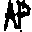
<style>
.page{position:relative;width:32px;height:32px;background:#ffffff}
.page>*{position:absolute;margin:0}
.t1{font:30.8px "ChasedThroughTheWoods";letter-spacing:0.1em;color:#000000;font-weight:bold;scale:0.55 1}
</style>
<div class="page">
<p class="t1" style="left:4px;top:0px;width:27px;height:32px">ap</p>
</div>
